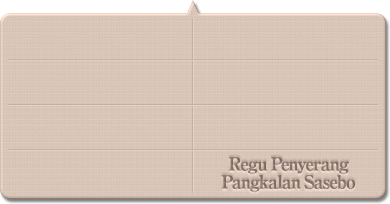
<style>
.page{position:relative;width:390px;height:204px}
.page>*{position:absolute;margin:0}
.t1{font:18px/18px "RyuminPro-ExBold";letter-spacing:-0.08em;color:#85746b}
</style>
<div class="page">
<p class="t1" style="left:221px;top:157px;width:134px;height:35px;text-align:center">Regu Penyerang<br>Pangkalan Sasebo</p>
</div>
